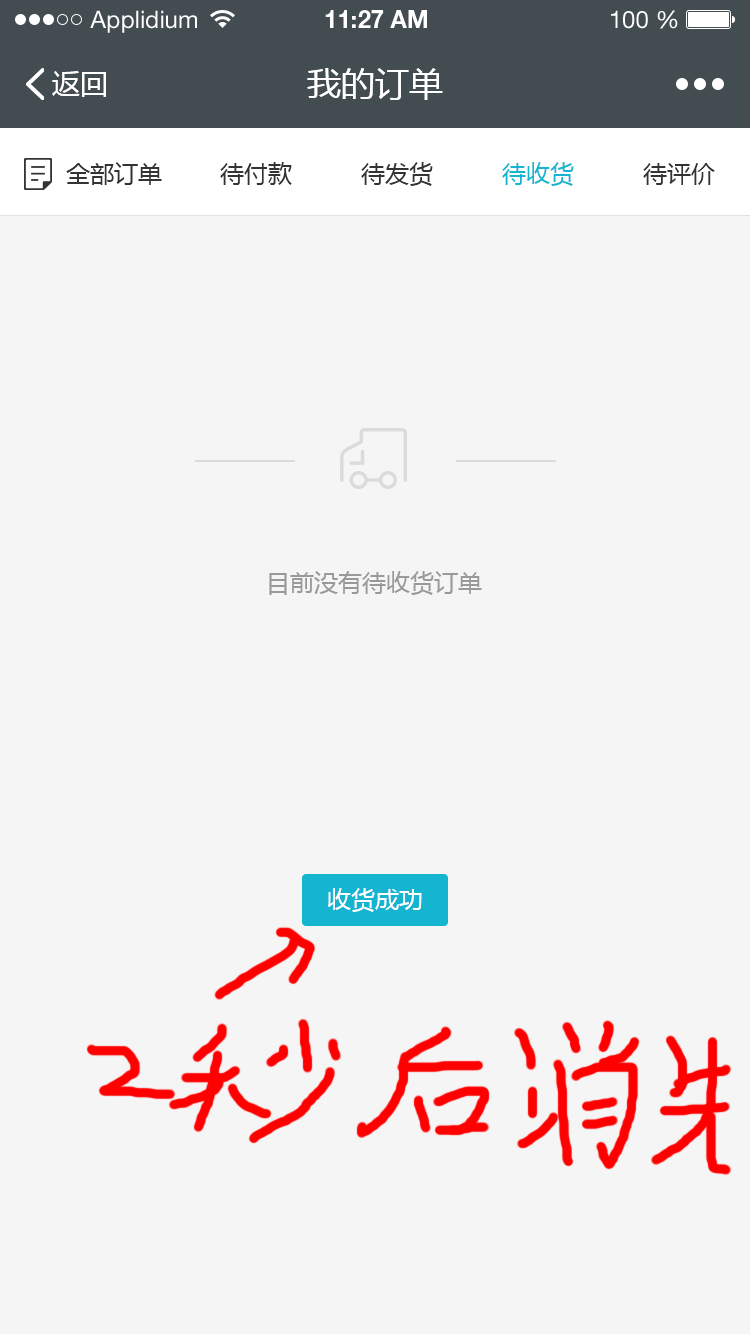
<style>
.page{position:relative;width:750px;height:1334px;background:#f5f5f5}
.page>*{position:absolute;margin:0}
.t1{font:24px "HelveticaNeueLTStd-Roman";color:#ffffff}
.t2{font:24px "HelveticaNeueLTStd-Bd";color:#ffffff}
.t3{font:28px "MicrosoftYaHei";color:#ffffff}
.t4{font:34px "MicrosoftYaHei";color:#ffffff}
.t5{font:24px "MicrosoftYaHei";color:#333333}
.t6{font:24px "MicrosoftYaHei";color:#15b4d0}
.t7{font:24px "MicrosoftYaHei";color:#999999}
.t8{font:24px "MicrosoftYaHei";color:#ffffff}
</style>
<div class="page">
<p class="t1" style="left:90px;top:10px;width:107px;height:23px">Applidium</p>
<p class="t2" style="left:325px;top:10px;width:102px;height:18px">11:27 AM</p>
<p class="t1" style="left:611px;top:10px;width:67px;height:19px">100 %</p>
<p class="t3" style="left:52px;top:71px;width:54px;height:26px">返回</p>
<p class="t4" style="left:307px;top:68px;width:136px;height:32px">我的订单</p>
<p class="t5" style="left:66px;top:162px;width:96px;height:23px">全部订单</p>
<p class="t5" style="left:220px;top:162px;width:72px;height:23px">待付款</p>
<p class="t5" style="left:361px;top:162px;width:72px;height:24px">待发货</p>
<p class="t6" style="left:502px;top:162px;width:72px;height:24px">待收货</p>
<p class="t5" style="left:643px;top:163px;width:72px;height:22px">待评价</p>
<p class="t7" style="left:269px;top:571px;width:213px;height:24px">目前没有待收货订单</p>
<p class="t8" style="left:328px;top:888px;width:94px;height:24px">收货成功</p>
</div>
